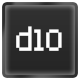
<style>
.page{position:relative;width:80px;height:80px}
.page>*{position:absolute;margin:0}
.t1{font:48px "Kenney-Pixel";color:#ffffff}
</style>
<div class="page">
<p class="t1" style="left:16px;top:26px;width:46px;height:25px">d10</p>
</div>
